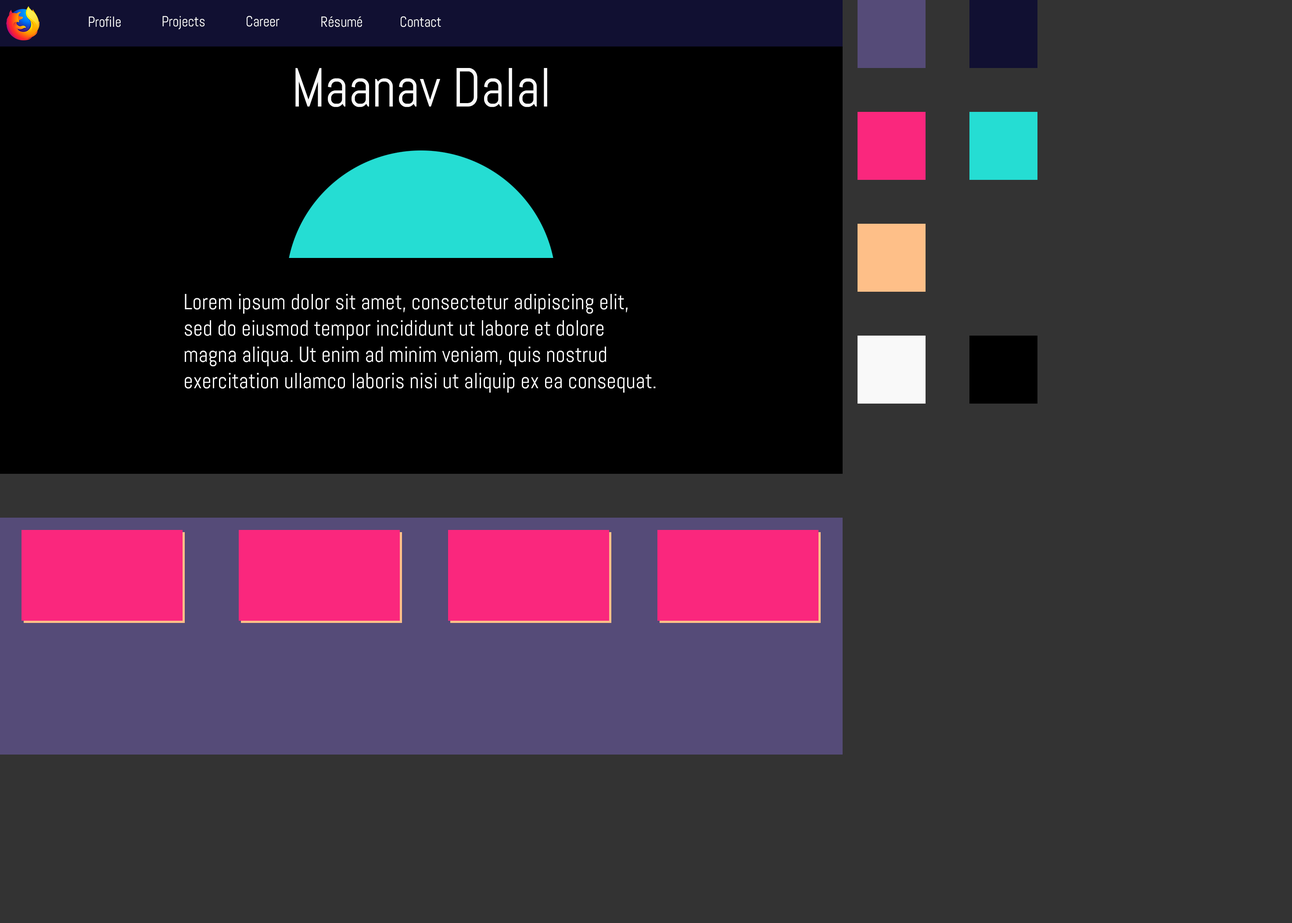
<style>
.page{position:relative;width:1292px;height:923px;background:#333333}
.page>*{position:absolute;margin:0}
.t1{font:14.6px "Abel-Regular";color:#ffffff;scale:0.95 1}
.t2{font:54.8px "Abel-Regular";color:#f9f9f9;scale:0.95 1}
.t3{font:21.9px "Abel-Regular";color:#f9f9f9;scale:0.95 1}
</style>
<div class="page">
<p class="t1" style="left:89px;top:16px;width:32px;height:11px">Profile</p>
<p class="t1" style="left:162px;top:16px;width:42px;height:13px">Projects</p>
<p class="t1" style="left:247px;top:16px;width:32px;height:11px">Career</p>
<p class="t1" style="left:321px;top:16px;width:41px;height:11px">Résumé</p>
<p class="t1" style="left:401px;top:16px;width:40px;height:11px">Contact</p>
<p class="t2" style="left:295px;top:68px;width:252px;height:39px">Maanav Dalal</p>
<p class="t3" style="left:185px;top:294px;width:471px;height:99px">Lorem ipsum dolor sit amet, consectetur adipiscing elit, sed do eiusmod tempor incididunt ut labore et dolore magna aliqua. Ut enim ad minim veniam, quis nostrud exercitation ullamco laboris nisi ut aliquip ex ea consequat.</p>
</div>
